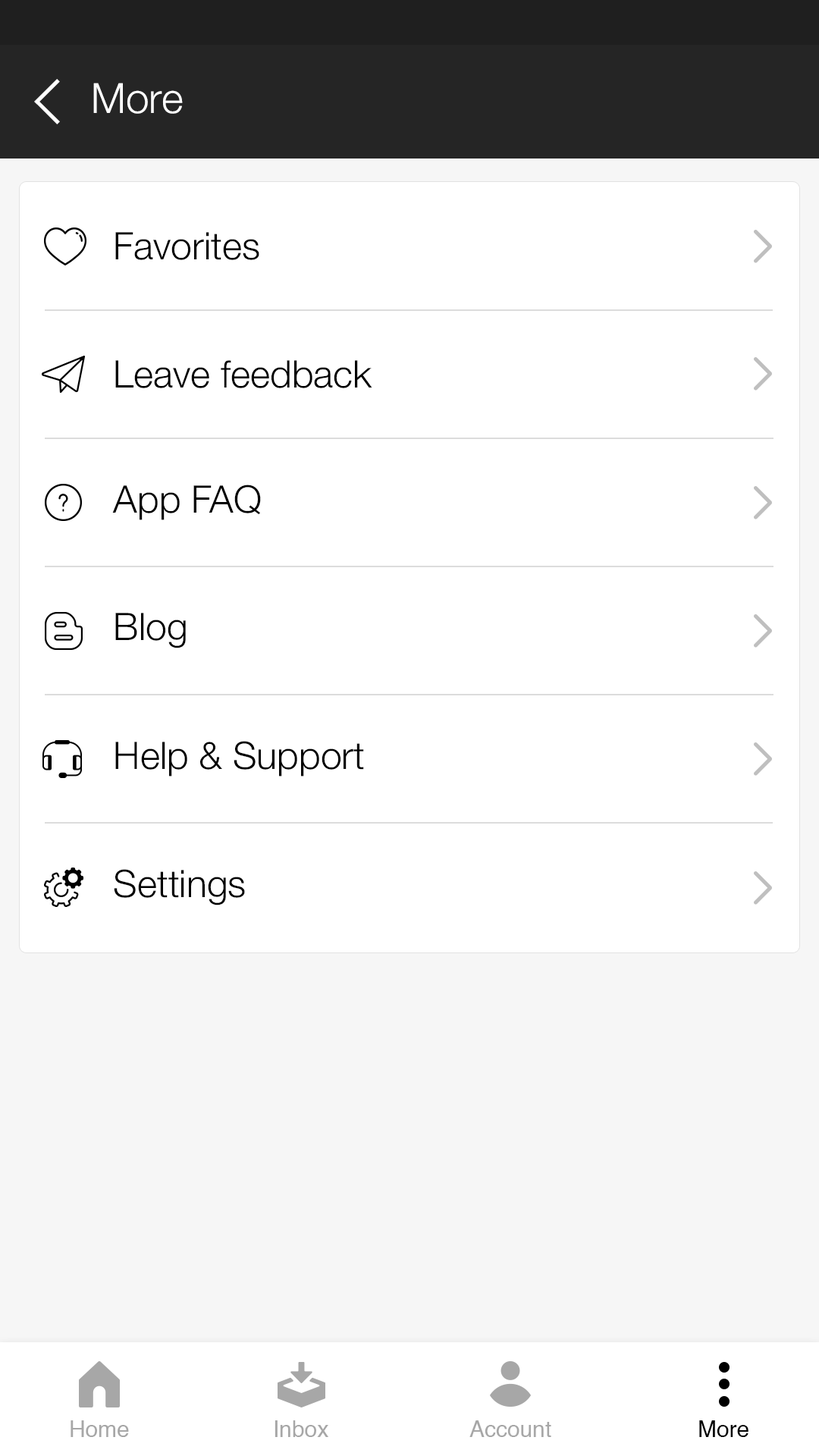
<style>
.page{position:relative;width:819px;height:1456px;background:#ffffff}
.page>*{position:absolute;margin:0}
.t1{font:41.7px "HelveticaNeue-Light";color:#ffffff}
.t2{font:37.9px "HelveticaNeue-Light";color:#000000}
.t3{font:22.7px "Helvetica";color:#a7a7a7}
.t4{font:22.7px "Helvetica";color:#000000}
</style>
<div class="page">
<p class="t1" style="left:93px;top:83px;width:90px;height:31px">More</p>
<p class="t2" style="left:115px;top:232px;width:144px;height:28px">Favorites</p>
<p class="t2" style="left:115px;top:360px;width:257px;height:28px">Leave feedback</p>
<p class="t2" style="left:112px;top:485px;width:149px;height:35px">App FAQ</p>
<p class="t2" style="left:115px;top:613px;width:71px;height:35px">Blog</p>
<p class="t2" style="left:115px;top:741px;width:249px;height:36px">Help &amp; Support</p>
<p class="t2" style="left:114px;top:869px;width:131px;height:36px">Settings</p>
<p class="t3" style="left:71px;top:1420px;width:58px;height:17px">Home</p>
<p class="t3" style="left:275px;top:1420px;width:53px;height:17px">Inbox</p>
<p class="t3" style="left:469px;top:1420px;width:82px;height:17px">Account</p>
<p class="t4" style="left:699px;top:1420px;width:49px;height:17px">More</p>
</div>
